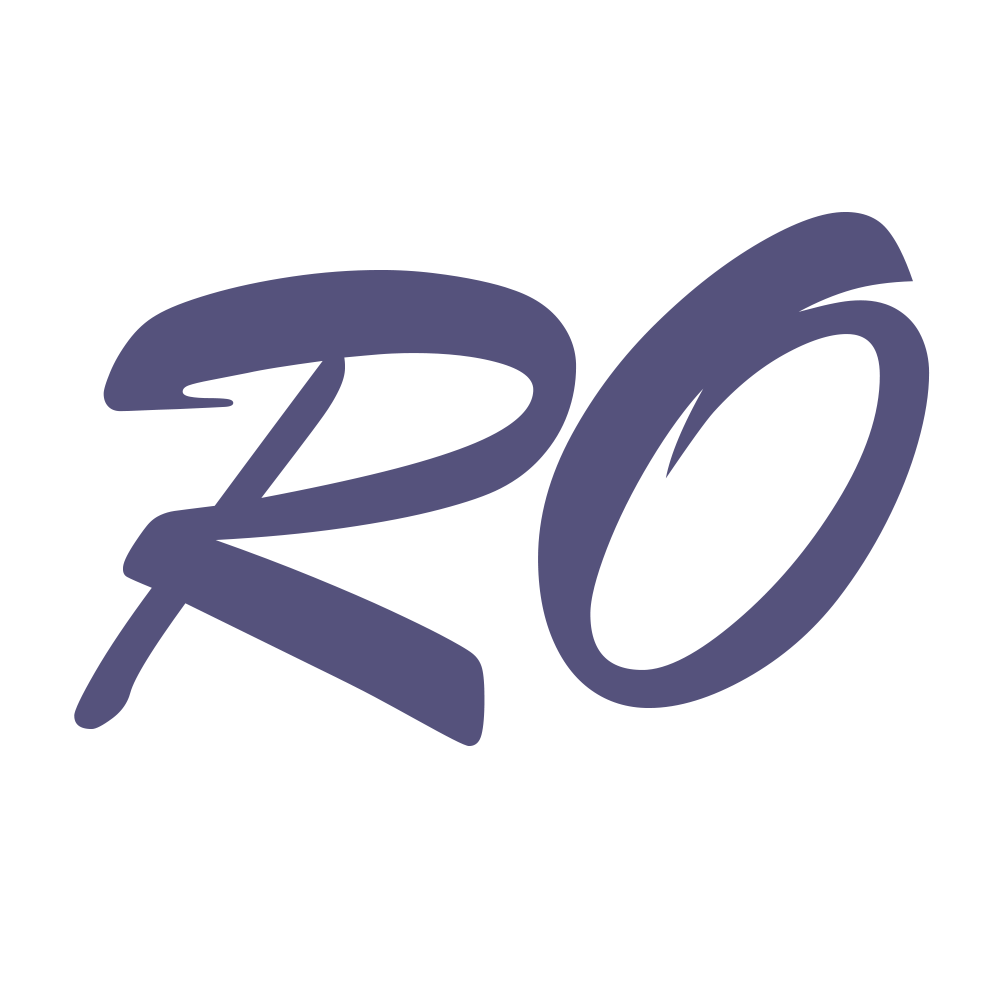
<style>
.page{position:relative;width:1000px;height:1000px;background:#ffffff}
.page>*{position:absolute;margin:0}
.t1{font:700px "BrushScriptMT";color:#55527c}
.t2{font:770px "BrushScriptMT";color:#55527c}
</style>
<div class="page">
<p class="t1" style="left:74px;top:212px;width:856px;height:534px">R<span class="t2">O</span></p>
</div>
